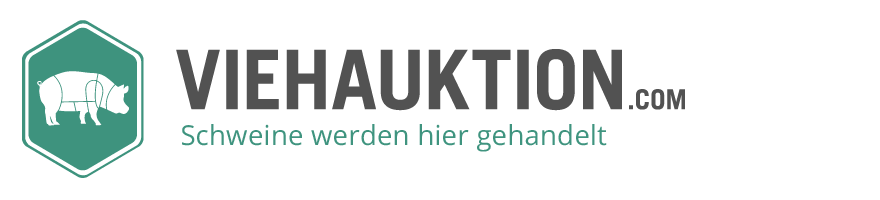
<style>
.page{position:relative;width:880px;height:200px;background:#ffffff}
.page>*{position:absolute;margin:0}
.t1{font:82.2px "TradeGothicLTStd-Bold";letter-spacing:-0.007em;color:#525252;text-transform:uppercase}
.t2{font:27.4px "TradeGothicLTStd-Bold";letter-spacing:-0.007em;color:#525252;text-transform:uppercase}
.t3{font:27.4px "OpenSans";letter-spacing:0.01em;color:#3f947f}
</style>
<div class="page">
<p class="t1" style="left:176px;top:49px;width:509px;height:62px">VieHAuktion<span class="t2">.com</span></p>
<p class="t3" style="left:182px;top:124px;width:425px;height:28px">Schweine werden hier gehandelt</p>
</div>
